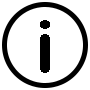
<style>
.page{position:relative;width:90px;height:90px;background:#ffffff}
.page>*{position:absolute;margin:0}
.t1{font:72px "ArialRoundedMTBold";color:#000000}
</style>
<div class="page">
<p class="t1" style="left:40px;top:20px;width:10px;height:53px">i</p>
</div>
